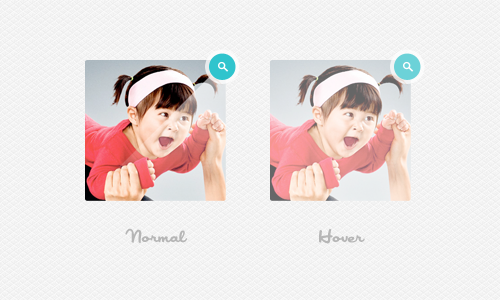
<style>
.page{position:relative;width:500px;height:300px}
.page>*{position:absolute;margin:0}
.t1{font:20px "Japan";color:#b6b6b6}
</style>
<div class="page">
<p class="t1" style="left:125px;top:228px;width:62px;height:15px">Normal</p>
<p class="t1" style="left:319px;top:228px;width:46px;height:16px">Hover</p>
</div>
